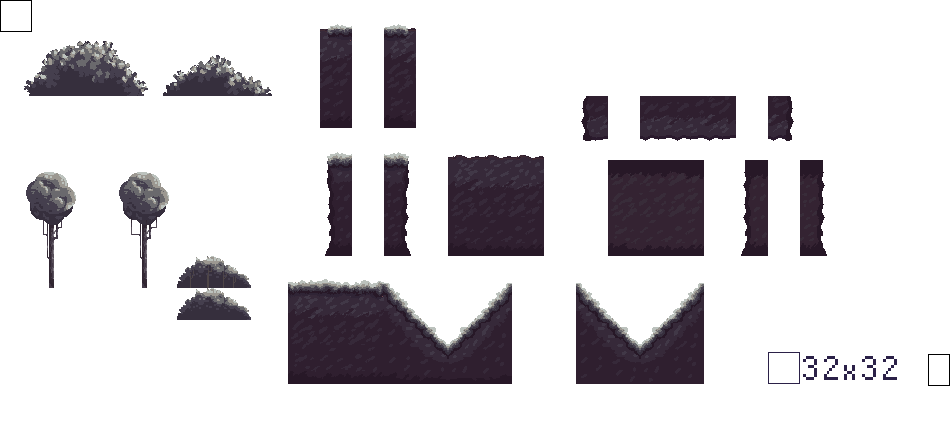
<style>
.page{position:relative;width:950px;height:448px;background:#ffffff}
.page>*{position:absolute;margin:0}
.t1{font:30px "Small Fonts";letter-spacing:0.1em;color:#2b2148;scale:0.92 1}
</style>
<div class="page">
<p class="t1" style="left:803px;top:356px;width:94px;height:24px">32x32</p>
</div>
